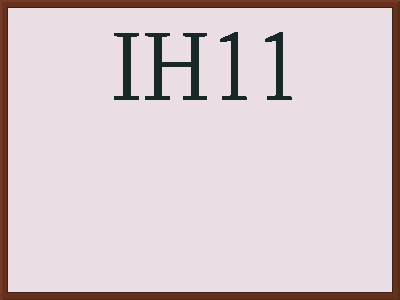
<style>
.page{position:relative;width:400px;height:300px;background:#eadde4}
.page>*{position:absolute;margin:0}
.t1{font:100px "Sylfaen";color:#182728;scale:0.9 1}
</style>
<div class="page">
<p class="t1" style="left:114px;top:32px;width:178px;height:68px">IH11</p>
</div>
